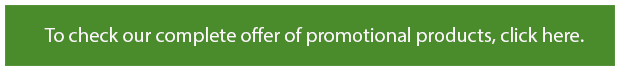
<style>
.page{position:relative;width:620px;height:71px;background:#4a8b2c}
.page>*{position:absolute;margin:0}
.t1{font:20.3px "MingLiU";color:#fdf9fb}
</style>
<div class="page">
<p class="t1" style="left:44px;top:27px;width:540px;height:19px">To check our complete offer of promotional products, click here.</p>
</div>
